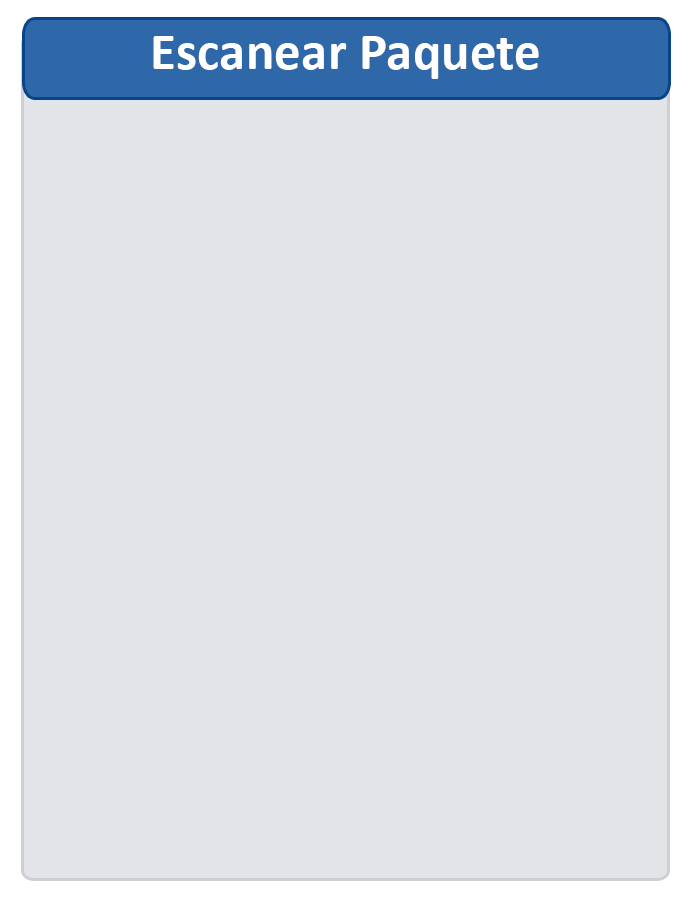
<style>
.page{position:relative;width:700px;height:900px;background:#e2e4e7}
.page>*{position:absolute;margin:0}
.t1{font:53.4px "Calibri-Bold";color:#ffffff}
</style>
<div class="page">
<p class="t1" style="left:153px;top:36px;width:386px;height:43px">Escanear Paquete</p>
</div>
